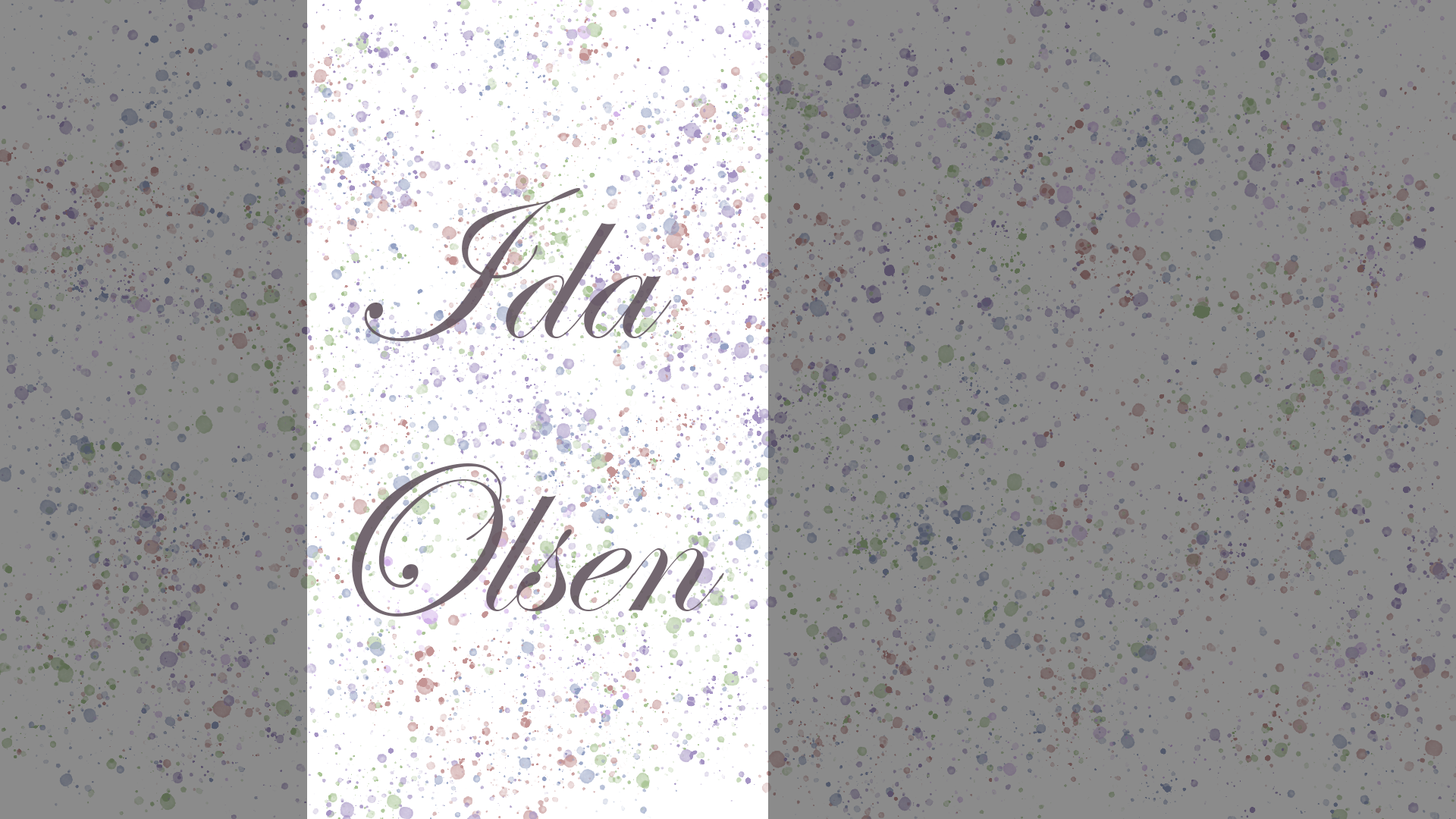
<style>
.page{position:relative;width:1456px;height:819px;background:#8b8b8b}
.page>*{position:absolute;margin:0}
.t1{font:227.5px "EdwardianScriptITC";color:#5f505b}
</style>
<div class="page">
<p class="t1" style="left:352px;top:188px;width:372px;height:429px;text-align:center;opacity:0.9">Ida<br>Olsen</p>
</div>
